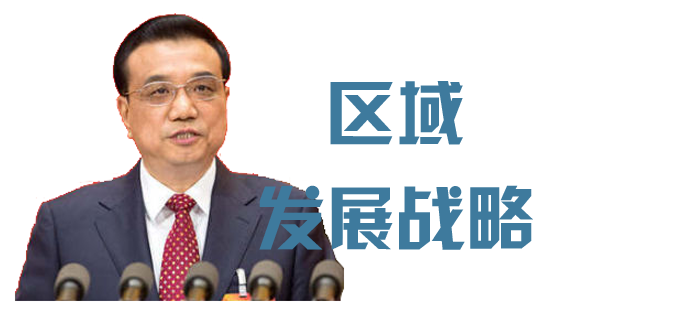
<style>
.page{position:relative;width:700px;height:312px;background:#ffffff}
.page>*{position:absolute;margin:0}
.t1{font:70px/105px "JLinXin";color:#3e7a9d}
</style>
<div class="page">
<p class="t1" style="left:259px;top:81px;width:274px;height:169px;text-align:center">区域<br>发展战略</p>
</div>
